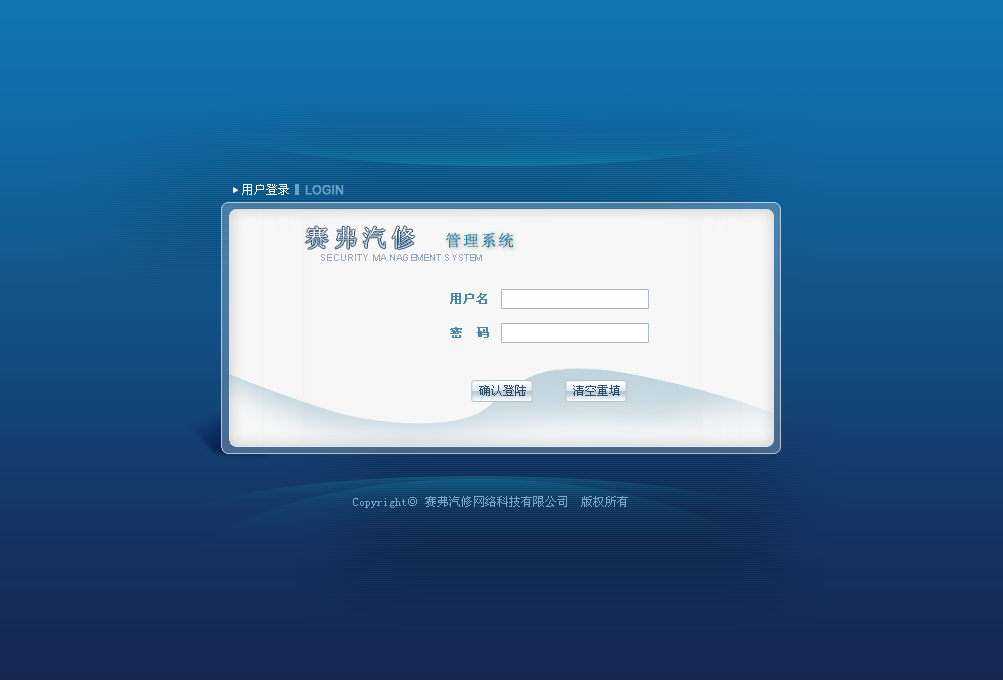
<style>
.page{position:relative;width:1003px;height:680px}
.page>*{position:absolute;margin:0}
.t1{font:12px "SimSun";color:#ffffff}
.t2{font:12px "ArialMT";color:#60a4cd;font-weight:bold}
.t3{font:16px "SimSun";letter-spacing:0.1em;color:#06769e}
.t4{font:9px "ArialMT";letter-spacing:0.05em;color:#95a5ba}
.t5{font:12px/34px "SimSun";color:#478aa2;font-weight:bold}
.t6{font:12px "SimSun";color:#2a4a61}
.t7{font:12px "SimSun";color:#79a9c8}
</style>
<div class="page">
<p class="t1" style="left:242px;top:184px;width:47px;height:11px">用户登录</p>
<p class="t2" style="left:305px;top:185px;width:39px;height:10px">LOGIN</p>
<p class="t3" style="left:446px;top:232px;width:68px;height:16px">管理系统</p>
<p class="t4" style="left:321px;top:254px;width:161px;height:7px">SECURITY MA NAGEMENT SYSTEM</p>
<p class="t5" style="left:450px;top:293px;width:39px;height:45px;text-align:justify">用户名<br>密  码</p>
<p class="t6" style="left:479px;top:385px;width:47px;height:11px">确认登陆</p>
<p class="t6" style="left:573px;top:385px;width:47px;height:11px">清空重填</p>
<p class="t7" style="left:353px;top:496px;width:275px;height:12px">Copyright◎ 赛弗汽修网络科技有限公司  版权所有</p>
</div>
